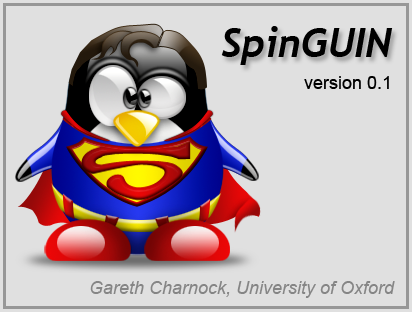
<style>
.page{position:relative;width:412px;height:312px;background:#e0e0e0}
.page>*{position:absolute;margin:0}
.t1{font:40px "Trebuchet-BoldItalic";color:#000000}
.t2{font:18px "ArialMT";color:#000000}
.t3{font:18px "Arial-ItalicMT";color:#858585}
</style>
<div class="page">
<p class="t1" style="left:221px;top:26px;width:172px;height:39px">SpinGUIN</p>
<p class="t2" style="left:304px;top:76px;width:85px;height:13px">version 0.1</p>
<p class="t3" style="left:90px;top:281px;width:305px;height:17px">Gareth Charnock, University of Oxford</p>
</div>
